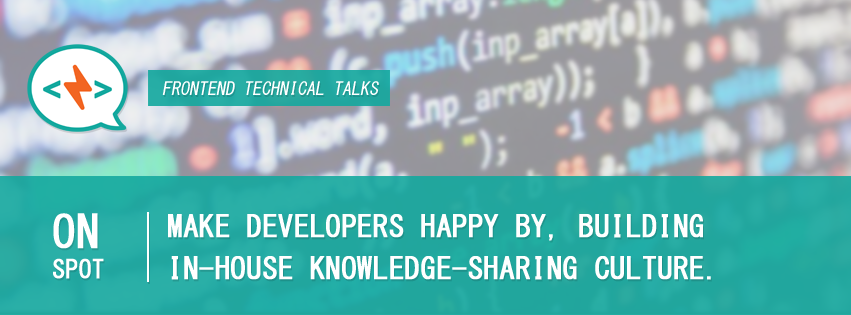
<style>
.page{position:relative;width:851px;height:315px}
.page>*{position:absolute;margin:0}
.t1{font:18px "MS-Gothic";color:#ffffff;text-transform:uppercase;font-style:italic}
.t2{font:25px "MS-Gothic";color:#ffffff;text-transform:uppercase;font-weight:bold}
.t3{font:45px "MS-Gothic";color:#ffffff;text-transform:uppercase;font-weight:bold}
.t4{font:30px/42px "MS-Gothic";color:#ffffff;text-transform:uppercase;font-weight:bold}
</style>
<div class="page">
<p class="t1" style="left:162px;top:81px;width:217px;height:14px">frontend technical talks</p>
<p class="t2" style="left:53px;top:213px;width:51px;height:66px"><span class="t3">ON<br></span>SPOT</p>
<p class="t4" style="left:168px;top:214px;width:543px;height:66px">Make developers happy by, building<br>in-house knowledge-shaRing culture.</p>
</div>
